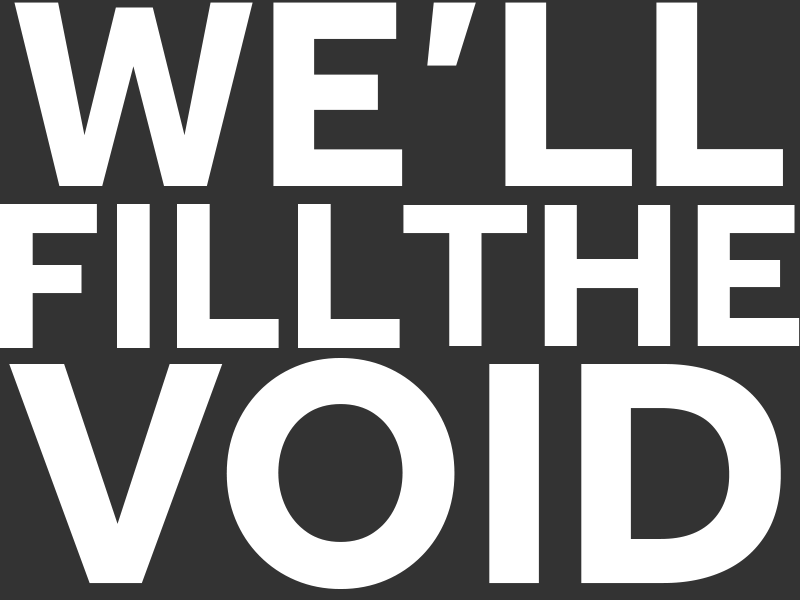
<style>
.page{position:relative;width:800px;height:600px;background:#333333}
.page>*{position:absolute;margin:0}
.t1{font:275.1px "Effra-Bold";color:#ffffff}
.t2{font:216.1px "Effra-Bold";color:#ffffff}
.t3{font:212.4px "Effra-Bold";color:#ffffff}
.t4{font:328px "Effra-Bold";color:#ffffff}
</style>
<div class="page">
<p class="t1" style="left:14px;top:2px;width:769px;height:184px">WE’LL</p>
<p class="t2" style="left:0px;top:204px;width:400px;height:144px">FILL</p>
<p class="t3" style="left:403px;top:205px;width:397px;height:141px">THE</p>
<p class="t4" style="left:9px;top:358px;width:772px;height:231px">VOID</p>
</div>
